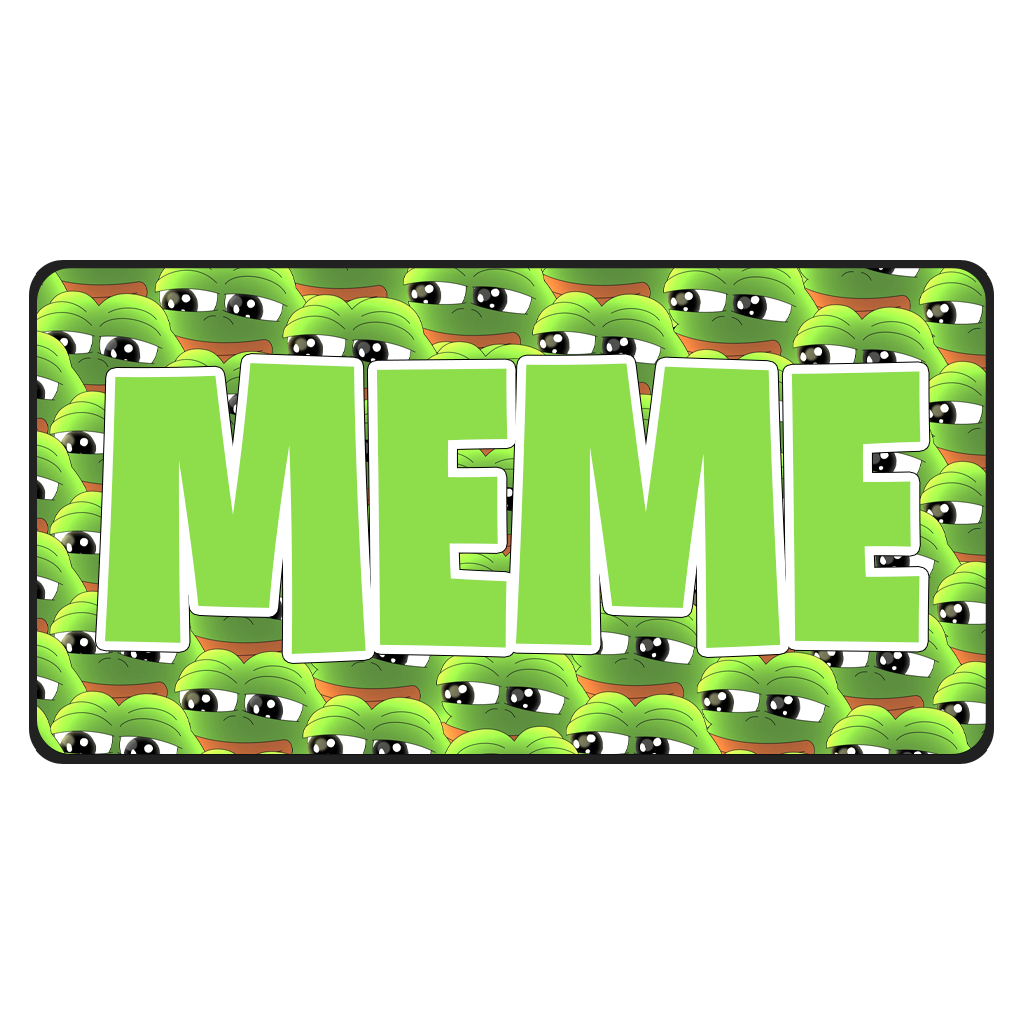
<style>
.page{position:relative;width:1024px;height:1024px;background:#ffffff}
.page>*{position:absolute;margin:0}
.t1{font:397.3px "BurbankBigCondensed-Black";color:#8edd4a}
</style>
<div class="page">
<p class="t1" style="left:104px;top:363px;width:817px;height:291px">MEME</p>
</div>
